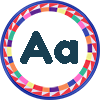
<style>
.page{position:relative;width:100px;height:100px;background:#ffffff}
.page>*{position:absolute;margin:0}
.t1{font:44.9px "ForkdokaOne-Regular";color:#183f52}
</style>
<div class="page">
<p class="t1" style="left:20px;top:31px;width:58px;height:33px">Aa</p>
</div>
